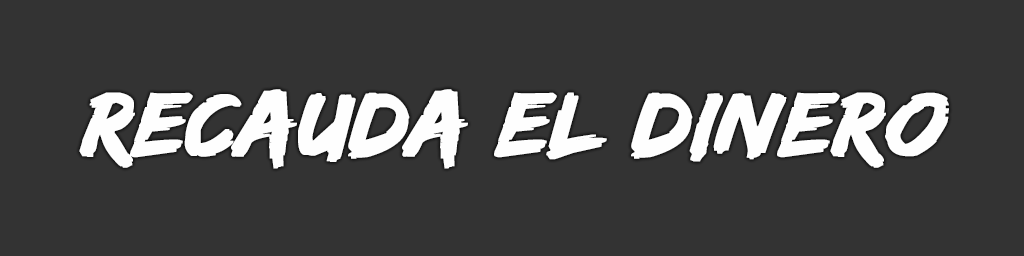
<style>
.page{position:relative;width:1024px;height:256px;background:#333333}
.page>*{position:absolute;margin:0}
.t1{font:94px "EdoSZ";color:#fefefe;font-weight:bold;font-style:italic;scale:1.04 1}
</style>
<div class="page">
<p class="t1" style="left:79px;top:89px;width:870px;height:80px">RECAUDA EL DINERO</p>
</div>
